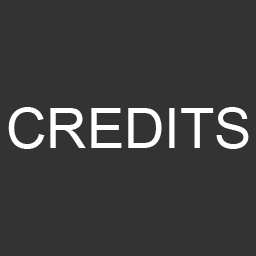
<style>
.page{position:relative;width:256px;height:256px;background:#333333}
.page>*{position:absolute;margin:0}
.t1{font:55.8px "ArialMT";color:#ffffff}
</style>
<div class="page">
<p class="t1" style="left:8px;top:107px;width:241px;height:42px">CREDITS</p>
</div>
